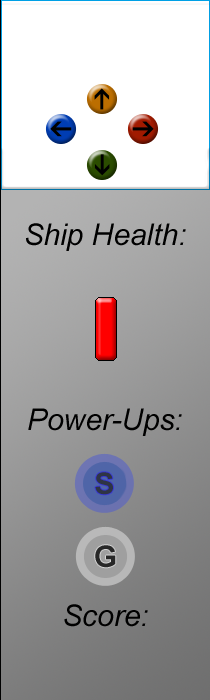
<style>
.page{position:relative;width:210px;height:700px;background:#ffffff}
.page>*{position:absolute;margin:0}
.t1{font:30px "Arial-ItalicMT";color:#000000}
</style>
<div class="page">
<p class="t1" style="left:26px;top:223px;width:160px;height:28px">Ship Health:</p>
<p class="t1" style="left:28px;top:408px;width:154px;height:28px">Power-Ups:</p>
<p class="t1" style="left:64px;top:604px;width:84px;height:23px">Score:</p>
</div>
